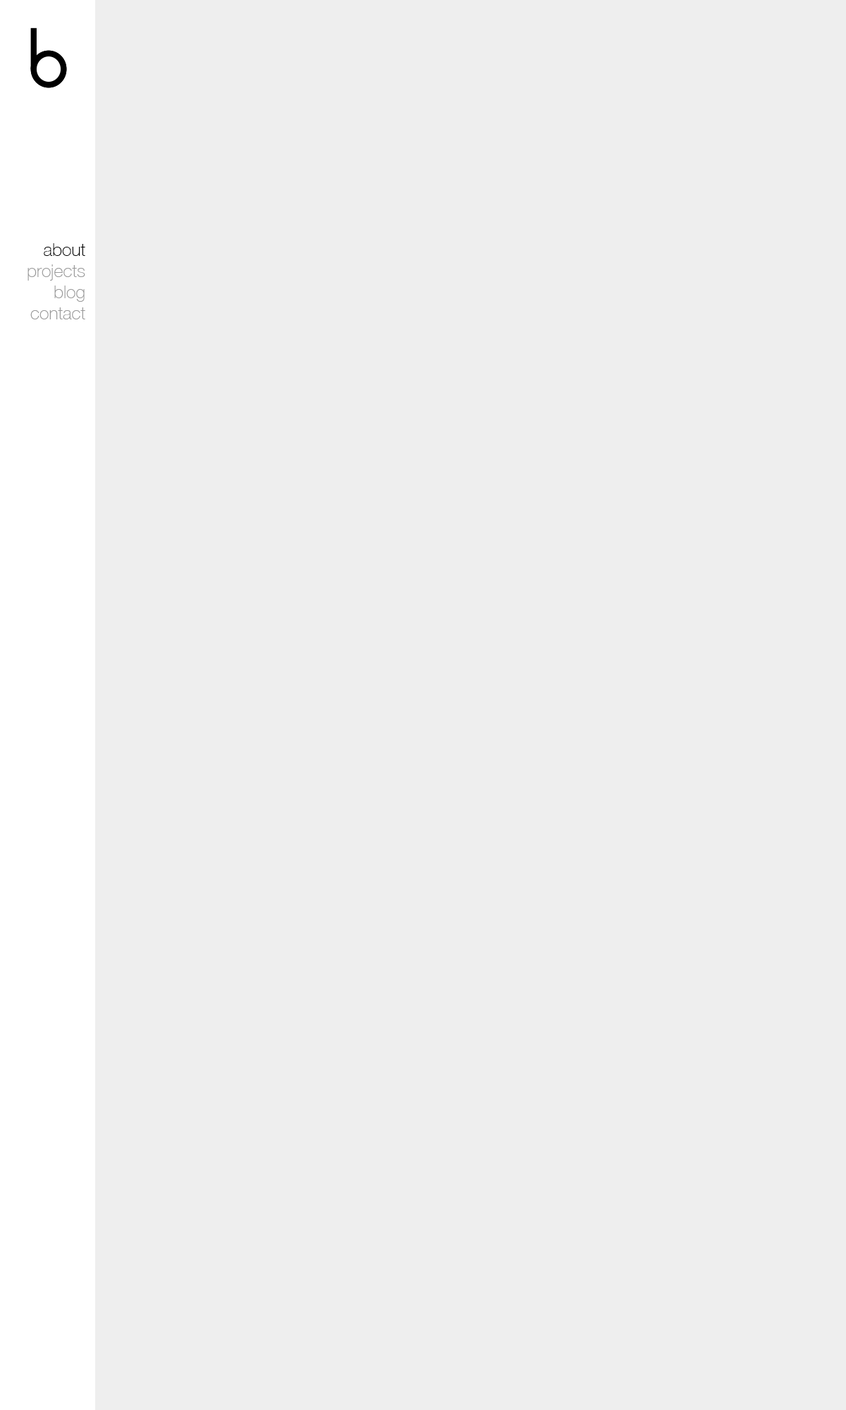
<style>
.page{position:relative;width:846px;height:1410px;background:#eeeeee}
.page>*{position:absolute;margin:0}
.t1{font:17.6px "HelveticaNeue-Thin";color:#999999}
.t2{font:17.6px "HelveticaNeue-Thin";color:#020202}
</style>
<div class="page">
<p class="t1" style="left:27px;top:243px;width:58px;height:76px;text-align:right"><span class="t2">about<br></span>projects<br>blog<br>contact</p>
</div>
